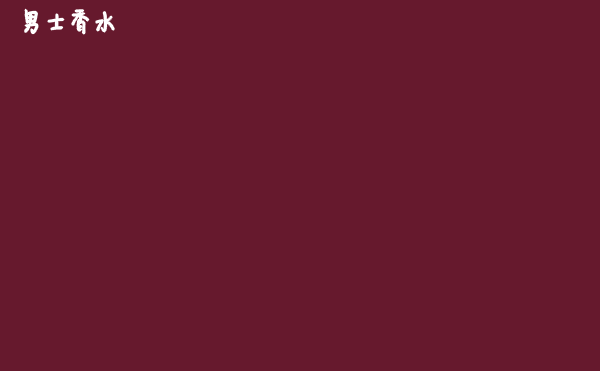
<style>
.page{position:relative;width:600px;height:371px;background:#66192d}
.page>*{position:absolute;margin:0}
.t1{font:24px "SentyTEA-Platinum";color:#ffffff}
</style>
<div class="page">
<p class="t1" style="left:25px;top:9px;width:89px;height:25px">男士香水</p>
</div>
